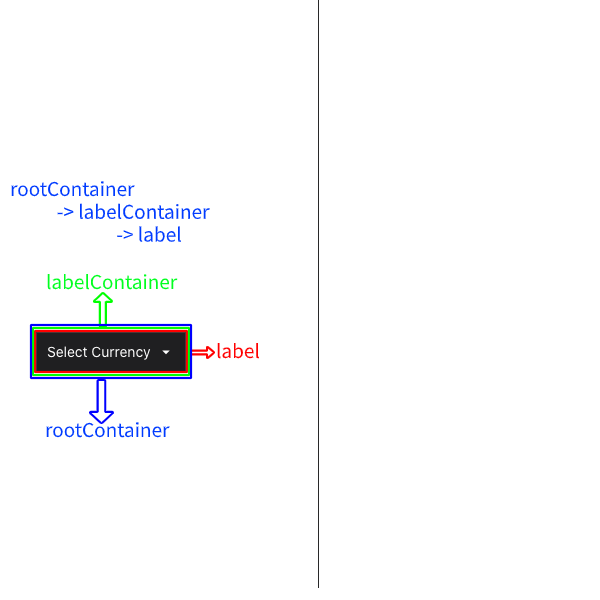
<style>
.page{position:relative;width:600px;height:600px;background:#ffffff}
.page>*{position:absolute;margin:0}
.t1{font:19px "SourceHanSansSC-Regular";color:#003bff}
.t2{font:19px "SourceHanSansSC-Regular";color:#00ff1f}
.t3{font:19px "SourceHanSansSC-Regular";color:#ff0000}
</style>
<div class="page">
<p class="t1" style="left:11px;top:181px;width:199px;height:61px">rootContainer<br>           -&gt; labelContainer<br>                         -&gt; label</p>
<p class="t2" style="left:47px;top:273px;width:131px;height:17px">labelContainer</p>
<p class="t3" style="left:217px;top:342px;width:42px;height:17px">label</p>
<p class="t1" style="left:46px;top:422px;width:124px;height:16px">rootContainer</p>
</div>
